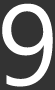
<style>
.page{position:relative;width:55px;height:90px;background:#333333}
.page>*{position:absolute;margin:0}
.t1{font:111.1px "MalgunGothic";color:#ffffff}
</style>
<div class="page">
<p class="t1" style="left:2px;top:3px;width:51px;height:84px">9</p>
</div>
